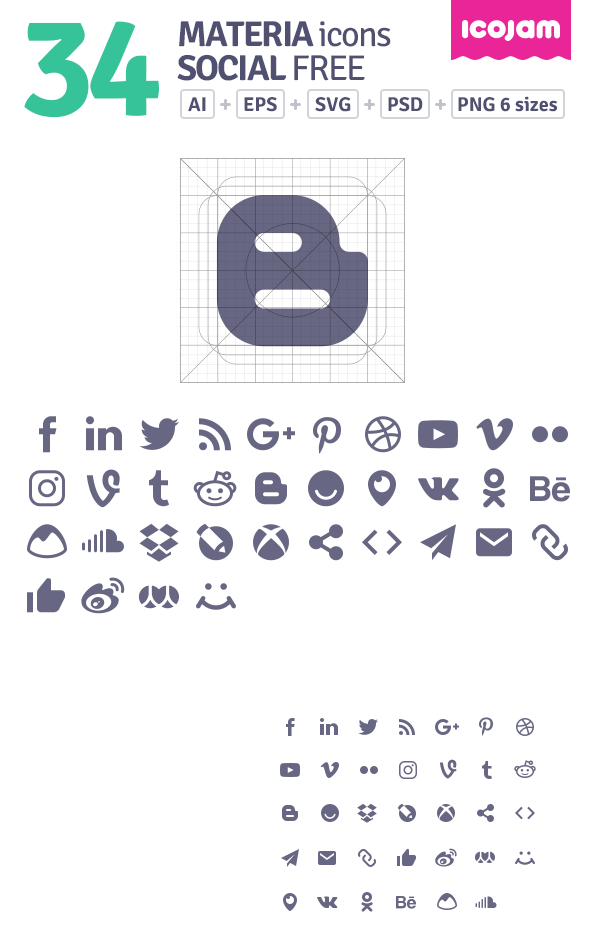
<style>
.page{position:relative;width:600px;height:930px;background:#ffffff}
.page>*{position:absolute;margin:0}
.t1{font:141.7px "SignikaNegative-Bold";letter-spacing:-0.05em;color:#37c39a}
.t2{font:36px/34px "SignikaNegative-Bold";letter-spacing:-0.05em;color:#505070;text-transform:uppercase}
.t3{font:36px/34px "SignikaNegative-Regular";letter-spacing:-0.05em;color:#505070}
.t4{font:36px/34px "SignikaNegative-Regular";letter-spacing:-0.05em;color:#505070;text-transform:uppercase}
.t5{font:20px "SignikaNegative-Bold";color:#505070}
</style>
<div class="page">
<p class="t1" style="left:24px;top:21px;width:135px;height:97px">34</p>
<p class="t2" style="left:177px;top:21px;width:214px;height:60px">materia <span class="t3">icons<br></span>SOCIAL <span class="t4">FREE</span></p>
<p class="t5" style="left:188px;top:97px;width:18px;height:15px">AI</p>
<p class="t5" style="left:244px;top:97px;width:33px;height:15px">EPS</p>
<p class="t5" style="left:315px;top:97px;width:36px;height:15px">SVG</p>
<p class="t5" style="left:388px;top:97px;width:35px;height:15px">PSD</p>
<p class="t5" style="left:458px;top:96px;width:100px;height:16px">PNG 6 sizes</p>
</div>
